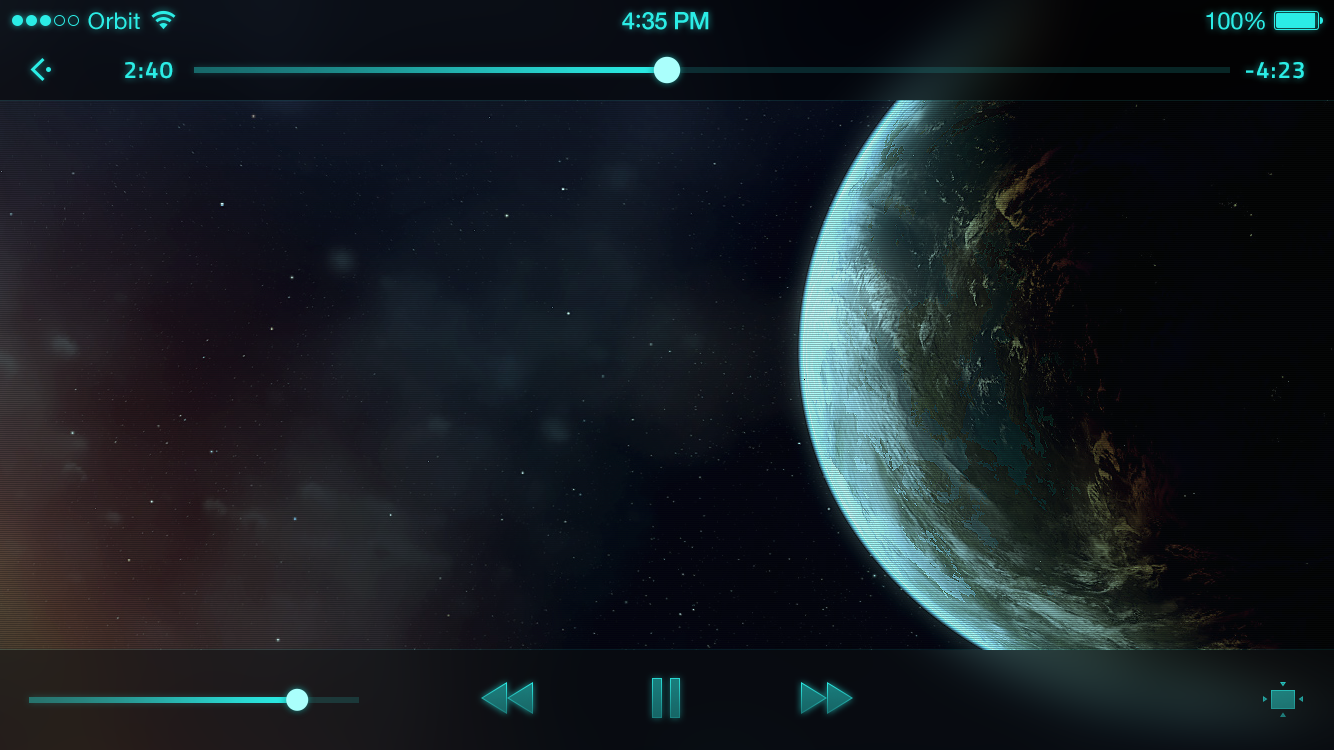
<style>
.page{position:relative;width:1334px;height:750px}
.page>*{position:absolute;margin:0}
.t1{font:23px "HelveticaNeue";letter-spacing:0.02em;color:#2bede6}
.t2{font:24px "HelveticaNeue-Medium";letter-spacing:-0.02em;color:#2bede6}
.t3{font:26px "Avenir-Medium";letter-spacing:-0.02em;color:#2bede6}
.t4{font:24px "HelveticaNeue";letter-spacing:-0.02em;color:#2bede6}
.t5{font:24px "Titillium-Semibold";letter-spacing:0.05em;color:#2bede6;text-transform:uppercase}
</style>
<div class="page">
<p class="t1" style="left:88px;top:12px;width:52px;height:18px">Orbit</p>
<p class="t2" style="left:622px;top:12px;width:87px;height:18px">4<span class="t3">:</span>35 PM</p>
<p class="t4" style="left:1206px;top:12px;width:59px;height:18px">100%</p>
<p class="t5" style="left:125px;top:62px;width:48px;height:17px">2:40</p>
<p class="t5" style="left:1246px;top:62px;width:58px;height:17px">-4:23</p>
</div>
